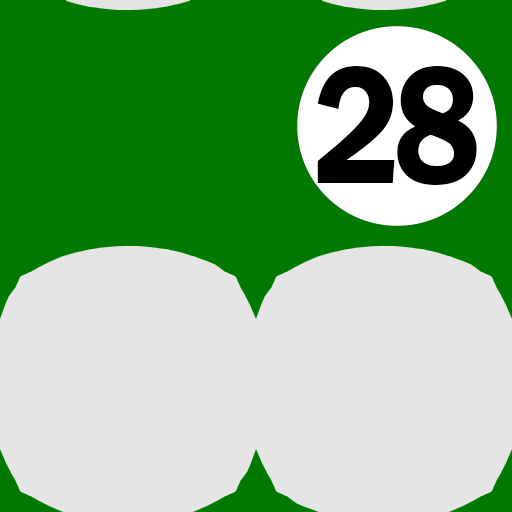
<style>
.page{position:relative;width:512px;height:512px;background:#e4e4e4}
.page>*{position:absolute;margin:0}
.t1{font:172.5px "FranklinGothic-Demi";letter-spacing:-0.05em;color:#010101;scale:0.87 1}
</style>
<div class="page">
<p class="t1" style="left:317px;top:66px;width:160px;height:119px">28</p>
</div>
